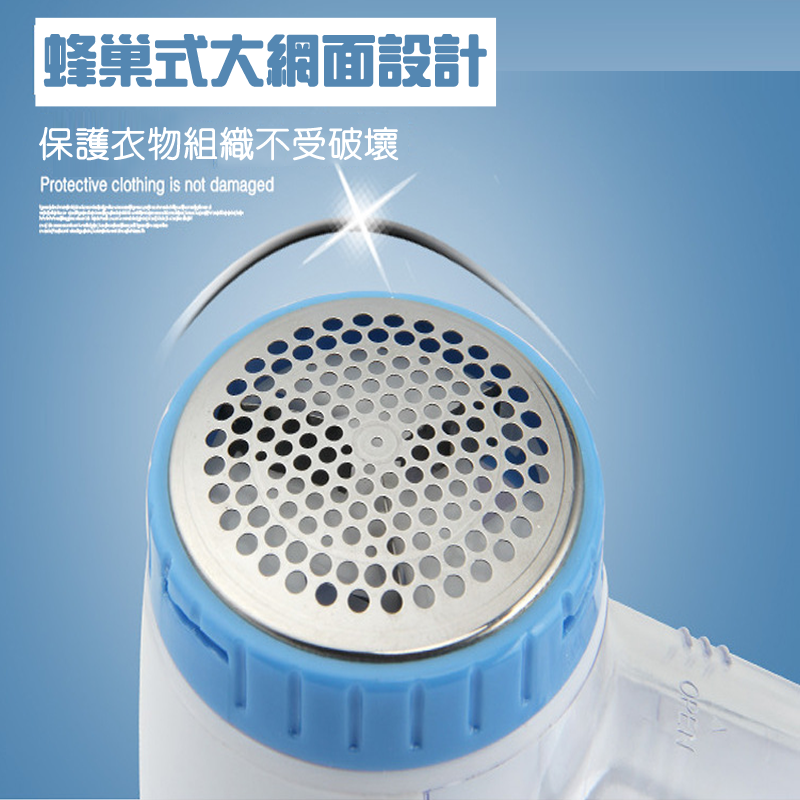
<style>
.page{position:relative;width:800px;height:800px}
.page>*{position:absolute;margin:0}
.t1{font:54.3px "HanWangZonYi";color:#5487b2;font-weight:bold}
.t2{font:35.2px "HanWangYenLight";color:#ffffff;font-weight:bold}
</style>
<div class="page">
<p class="t1" style="left:43px;top:34px;width:444px;height:53px">蜂巢式大網面設計</p>
<p class="t2" style="left:39px;top:126px;width:360px;height:35px">保護衣物組織不受破壞</p>
</div>
